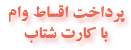
<style>
.page{position:relative;width:131px;height:50px;background:#ffffff}
.page>*{position:absolute;margin:0}
.t1{font:17.4px "BZarBold";color:#ea6953}
</style>
<div class="page">
<p class="t1" style="left:8px;top:5px;width:117px;height:38px;text-align:right">پرداخت اقساط وام<br> با کارت شتاب</p>
</div>
